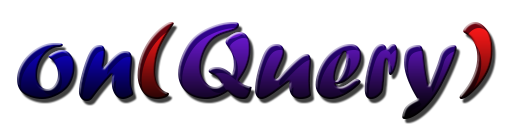
<style>
.page{position:relative;width:512px;height:128px;background:#ffffff}
.page>*{position:absolute;margin:0}
.t1{font:115px "ForteMT"}
</style>
<div class="page">
<p class="t1" style="left:17px;top:22px;width:476px;height:97px">on(Query)</p>
</div>
